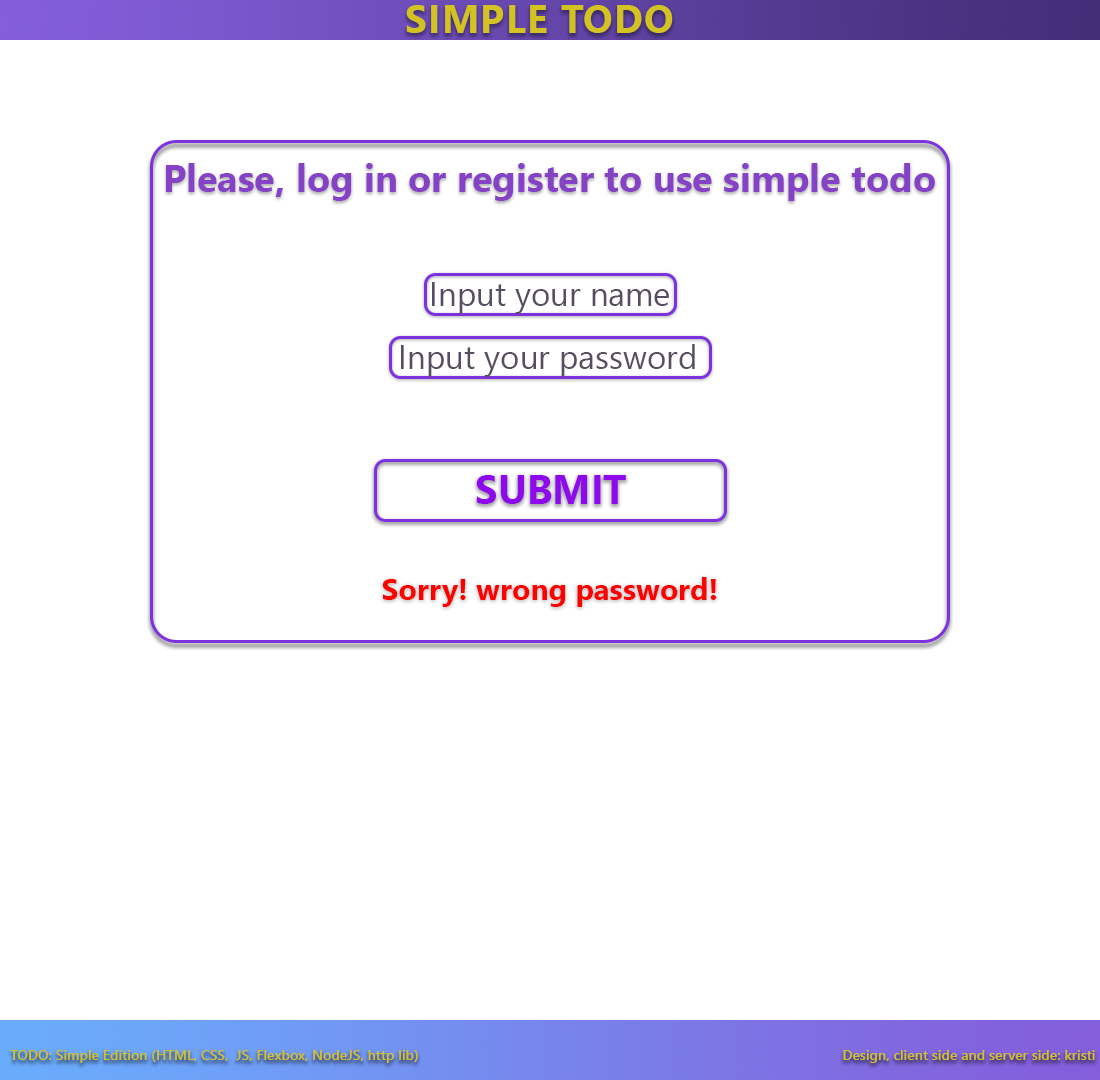
<style>
.page{position:relative;width:1100px;height:1080px;background:#ffffff}
.page>*{position:absolute;margin:0}
.t1{font:39px "SegoeUI-Bold";letter-spacing:0.03em;color:#d4c222;text-transform:uppercase}
.t2{font:38px "SegoeUI-Bold";color:#8642c6}
.t3{font:33px "SegoeUI";color:#584e61}
.t4{font:40px "SegoeUI-Bold";color:#8e09eb;text-transform:uppercase}
.t5{font:30px "SegoeUI-Bold";color:#ff0000}
.t6{font:14px "SegoeUI-Semibold";color:#d4c222}
</style>
<div class="page">
<p class="t1" style="left:406px;top:5px;width:267px;height:28px">Simple TODO</p>
<p class="t2" style="left:166px;top:163px;width:769px;height:38px">Please, log in or register to use simple todo</p>
<p class="t3" style="left:432px;top:282px;width:237px;height:32px">Input your name</p>
<p class="t3" style="left:401px;top:344px;width:294px;height:33px">Input your password</p>
<p class="t4" style="left:476px;top:475px;width:150px;height:29px">Submit</p>
<p class="t5" style="left:382px;top:577px;width:335px;height:30px">Sorry! wrong password!</p>
<p class="t6" style="left:10px;top:1050px;width:408px;height:13px">TODO: Simple Edition (HTML, CSS,  JS, Flexbox, NodeJS, http lib)</p>
<p class="t6" style="left:843px;top:1050px;width:252px;height:13px">Design, client side and server side: kristi</p>
</div>
